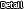
<style>
.page{position:relative;width:24px;height:9px;background:#ffffff}
.page>*{position:absolute;margin:0}
.t1{font:8px "KohinoorBangla-Regular";color:#ffffff}
</style>
<div class="page">
<p class="t1" style="left:1px;top:1px;width:22px;height:7px">Detail</p>
</div>
